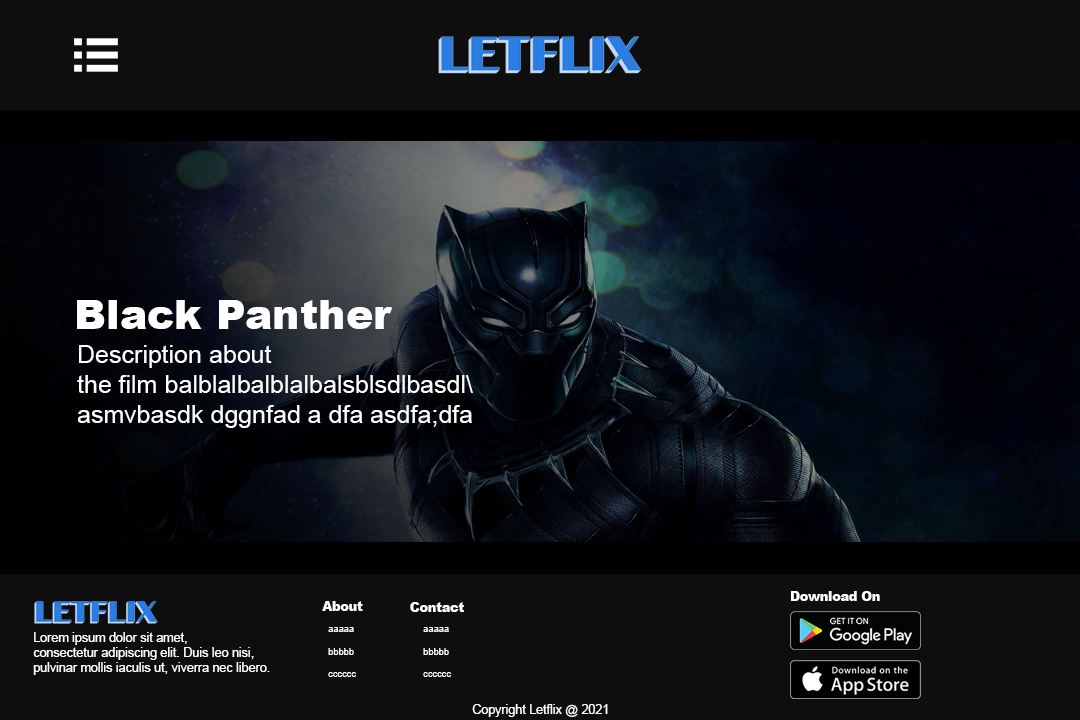
<style>
.page{position:relative;width:1080px;height:720px;background:#0e0e0e}
.page>*{position:absolute;margin:0}
.t1{font:41.3px "Arial-Black";color:#ffffff}
.t2{font:25px "ArialMT";color:#ffffff}
.t3{font:12.5px "Arial-Black";color:#ffffff}
.t4{font:9.3px "ArialMT";color:#ffffff}
.t5{font:12.5px "ArialMT";color:#ffffff}
</style>
<div class="page">
<p class="t1" style="left:77px;top:300px;width:316px;height:29px">Black Panther</p>
<p class="t2" style="left:77px;top:345px;width:396px;height:83px">Description about <br>the film balblalbalblalbalsblsdlbasdl\<br>asmvbasdk dggnfad a dfa asdfa;dfa</p>
<p class="t3" style="left:791px;top:591px;width:89px;height:10px">Download On</p>
<p class="t3" style="left:322px;top:601px;width:41px;height:10px">About</p>
<p class="t3" style="left:410px;top:602px;width:54px;height:10px">Contact</p>
<p class="t4" style="left:328px;top:627px;width:28px;height:50px">aaaaa<br><br>bbbbb<br><br>cccccc</p>
<p class="t4" style="left:423px;top:627px;width:28px;height:50px">aaaaa<br><br>bbbbb<br><br>cccccc</p>
<p class="t5" style="left:33px;top:632px;width:237px;height:43px">Lorem ipsum dolor sit amet,<br>consectetur adipiscing elit. Duis leo nisi, <br>pulvinar mollis iaculis ut, viverra nec libero.</p>
<p class="t5" style="left:472px;top:704px;width:136px;height:13px">Copyright Letflix @ 2021</p>
</div>
